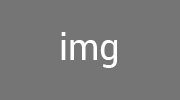
<style>
.page{position:relative;width:180px;height:100px;background:#757575}
.page>*{position:absolute;margin:0}
.t1{font:36px "Roboto-Regular";color:#ffffff}
</style>
<div class="page">
<p class="t1" style="left:61px;top:32px;width:56px;height:36px">img</p>
</div>
